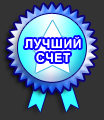
<style>
.page{position:relative;width:104px;height:120px;background:#333333}
.page>*{position:absolute;margin:0}
.t1{font:12px/14px "Arial-BoldMT";letter-spacing:0.05em;color:#ffffff;text-transform:uppercase}
</style>
<div class="page">
<p class="t1" style="left:25px;top:37px;width:56px;height:25px;text-align:center">ЛУЧШИЙ<br>СЧЕТ</p>
</div>
